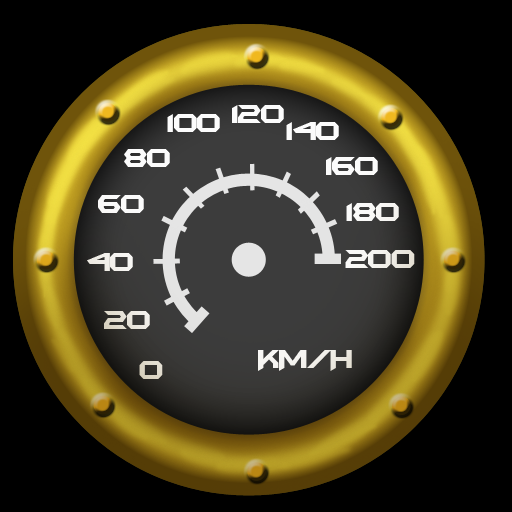
<style>
.page{position:relative;width:512px;height:512px;background:#000000}
.page>*{position:absolute;margin:0}
.t1{font:30px "BatmanForeverAlternate";letter-spacing:-0.075em;color:#fcfcfc}
.t2{font:30px "BatmanForeverAlternate";letter-spacing:-0.075em;color:#e7e3d9}
.t3{font:30px "BatmanForeverAlternate";letter-spacing:-0.075em;color:#ddd8c8}
</style>
<div class="page">
<p class="t1" style="left:232px;top:105px;width:52px;height:18px">120</p>
<p class="t1" style="left:167px;top:114px;width:53px;height:18px">100</p>
<p class="t1" style="left:286px;top:122px;width:53px;height:18px">140</p>
<p class="t1" style="left:124px;top:149px;width:46px;height:18px">80</p>
<p class="t1" style="left:326px;top:157px;width:52px;height:18px">160</p>
<p class="t1" style="left:98px;top:195px;width:46px;height:18px">60</p>
<p class="t1" style="left:346px;top:203px;width:53px;height:18px">180</p>
<p class="t1" style="left:87px;top:253px;width:46px;height:18px">40</p>
<p class="t1" style="left:345px;top:250px;width:70px;height:18px">200</p>
<p class="t2" style="left:104px;top:311px;width:46px;height:18px">20</p>
<p class="t1" style="left:258px;top:350px;width:94px;height:21px">KM/H</p>
<p class="t3" style="left:139px;top:361px;width:24px;height:18px">0</p>
</div>
